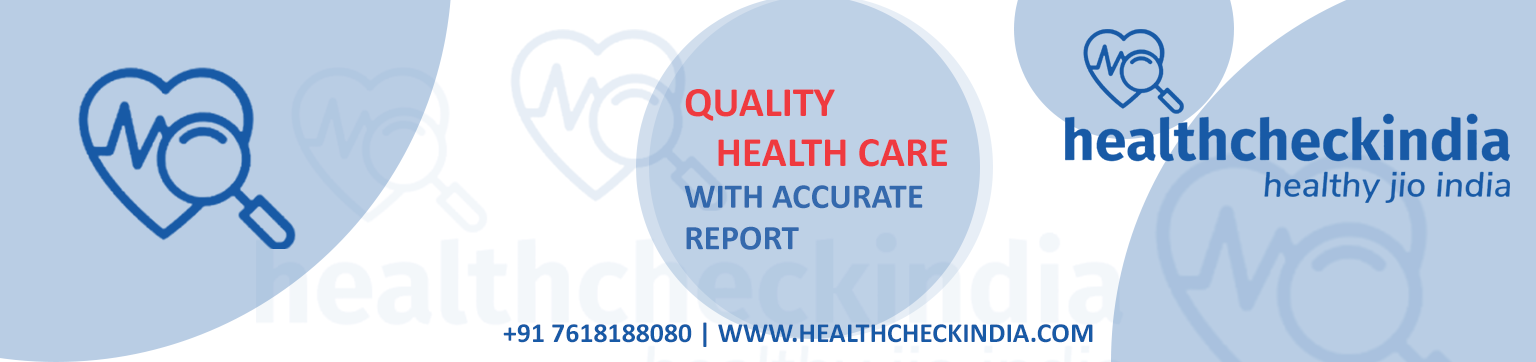
<style>
.page{position:relative;width:1536px;height:362px;background:#b9cde4}
.page>*{position:absolute;margin:0}
.t1{font:41.7px "Calibri-Bold"}
.t2{font:34.7px "Calibri-Bold"}
.t3{font:27.8px "Calibri-Bold";color:#185aa6}
</style>
<div class="page">
<p class="t1" style="left:684px;top:89px;width:263px;height:161px">QUALITY <br>    HEALTH CARE<br><span class="t2">WITH ACCURATE <br>REPORT</span></p>
<p class="t3" style="left:503px;top:322px;width:590px;height:25px">+91 7618188080 | WWW.HEALTHCHECKINDIA.COM</p>
</div>
